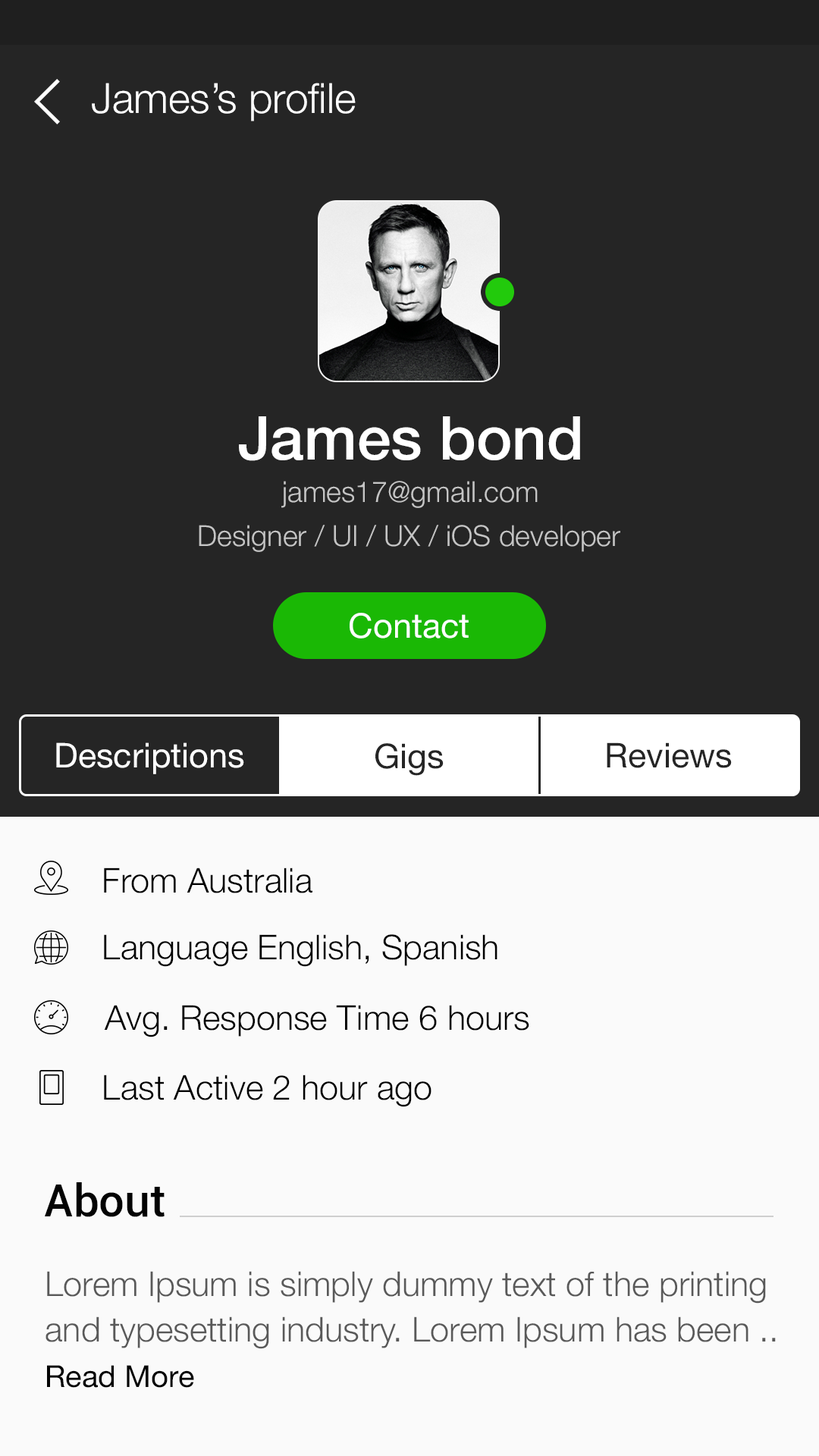
<style>
.page{position:relative;width:819px;height:1456px;background:#252525}
.page>*{position:absolute;margin:0}
.t1{font:41.7px "HelveticaNeue-Light";color:#ffffff}
.t2{font:60.7px "HelveticaNeue-Medium";color:#ffffff}
.t3{font:28.8px "HelveticaNeue-Light";color:#c5c5c5}
.t4{font:34.1px "HelveticaNeue";color:#ffffff}
.t5{font:34.1px "HelveticaNeue";color:#252525}
.t6{font:34.1px "HelveticaNeue-Light";color:#000000}
.t7{font:45.5px "Roboto-Medium";color:#030303}
.t8{font:34.1px/45.5px "HelveticaNeue-Light";color:#595959}
.t9{font:30.3px/45.5px "HelveticaNeue";color:#030303}
</style>
<div class="page">
<p class="t1" style="left:92px;top:83px;width:264px;height:38px">James’s profile</p>
<p class="t2" style="left:239px;top:416px;width:341px;height:45px">James bond</p>
<p class="t3" style="left:281px;top:481px;width:257px;height:27px">james17@gmail.com</p>
<p class="t3" style="left:199px;top:525px;width:421px;height:27px">Designer / UI / UX / iOS developer</p>
<p class="t4" style="left:350px;top:613px;width:119px;height:26px">Contact</p>
<p class="t4" style="left:56px;top:742px;width:188px;height:32px">Descriptions</p>
<p class="t5" style="left:375px;top:743px;width:69px;height:33px">Gigs</p>
<p class="t5" style="left:607px;top:742px;width:125px;height:26px">Reviews</p>
<p class="t6" style="left:104px;top:868px;width:208px;height:25px">From Australia</p>
<p class="t6" style="left:104px;top:934px;width:393px;height:33px">Language English, Spanish</p>
<p class="t6" style="left:104px;top:1005px;width:425px;height:32px">Avg. Response Time 6 hours</p>
<p class="t6" style="left:104px;top:1075px;width:327px;height:32px">Last Active 2 hour ago</p>
<p class="t7" style="left:45px;top:1182px;width:120px;height:35px">About</p>
<p class="t8" style="left:45px;top:1271px;width:731px;height:117px">Lorem Ipsum is simply dummy text of the printing and typesetting industry. Lorem Ipsum has been .. <br><span class="t9">Read More</span></p>
</div>
